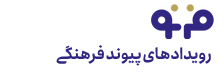
<style>
.page{position:relative;width:224px;height:72px;background:#ffffff}
.page>*{position:absolute;margin:0}
.t1{font:15.4px "Anjoman-Bold";letter-spacing:-0.02em;color:#312783;scale:1.06 1}
</style>
<div class="page">
<p class="t1" style="left:56px;top:45px;width:155px;height:21px">رویدادهای پیوند فرهنگی</p>
</div>
